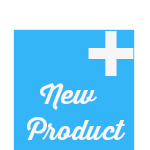
<style>
.page{position:relative;width:150px;height:150px;background:#34b5f7}
.page>*{position:absolute;margin:0}
.t1{font:89px "Arial-BoldMT";color:#f6f6f6}
.t2{font:27px "ThirstyScript-Bold";color:#f6f6f6}
</style>
<div class="page">
<p class="t1" style="left:88px;top:31px;width:46px;height:45px">+</p>
<p class="t2" style="left:40px;top:83px;width:57px;height:27px">New</p>
<p class="t2" style="left:27px;top:117px;width:99px;height:23px">Product</p>
</div>
